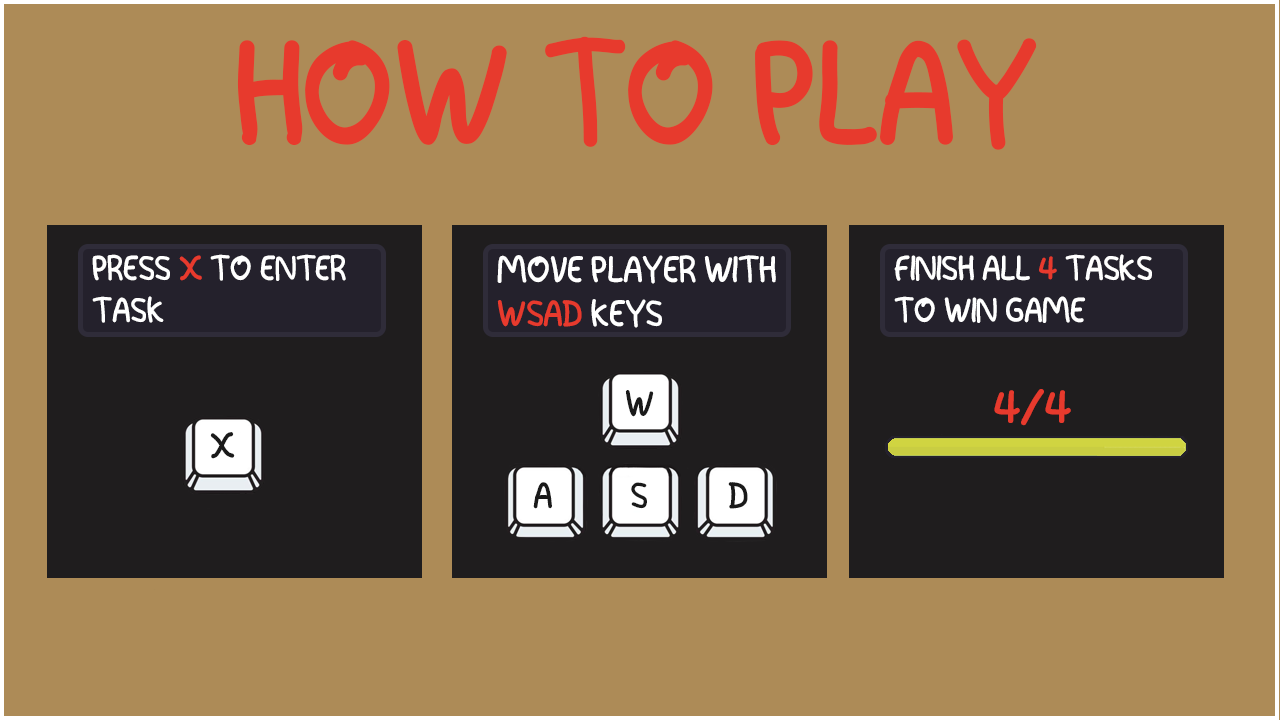
<style>
.page{position:relative;width:1280px;height:720px;background:#ad8b57}
.page>*{position:absolute;margin:0}
.t1{font:148px "Spacekids";color:#e73a2d}
.t2{font:35px "Spacekids";color:#ffffff}
.t3{font:35px "Spacekids";color:#e73a2d}
.t4{font:37px "Spacekids";color:#ffffff}
.t5{font:37px "Spacekids";color:#e73a2d}
.t6{font:37px "Spacekids";color:#1a1a1a}
.t7{font:50px "Spacekids";color:#e73a2d}
</style>
<div class="page">
<p class="t1" style="left:237px;top:36px;width:800px;height:114px">HOW TO PLAY</p>
<p class="t2" style="left:92px;top:254px;width:254px;height:69px">PRESS <span class="t3">X </span>TO ENTER TASK</p>
<p class="t4" style="left:497px;top:255px;width:279px;height:73px">MOVE PLAYER WITH <span class="t5">WSAD </span>KEYS</p>
<p class="t2" style="left:894px;top:254px;width:258px;height:69px">FINISH ALL <span class="t3">4 </span>TASKS <br>TO WIN GAME</p>
<p class="t6" style="left:625px;top:390px;width:29px;height:27px">W</p>
<p class="t7" style="left:994px;top:389px;width:77px;height:37px">4/4</p>
<p class="t6" style="left:210px;top:432px;width:25px;height:27px">X</p>
<p class="t6" style="left:533px;top:482px;width:19px;height:27px">A</p>
<p class="t6" style="left:631px;top:482px;width:16px;height:27px">S</p>
<p class="t6" style="left:728px;top:482px;width:20px;height:27px">D</p>
</div>
